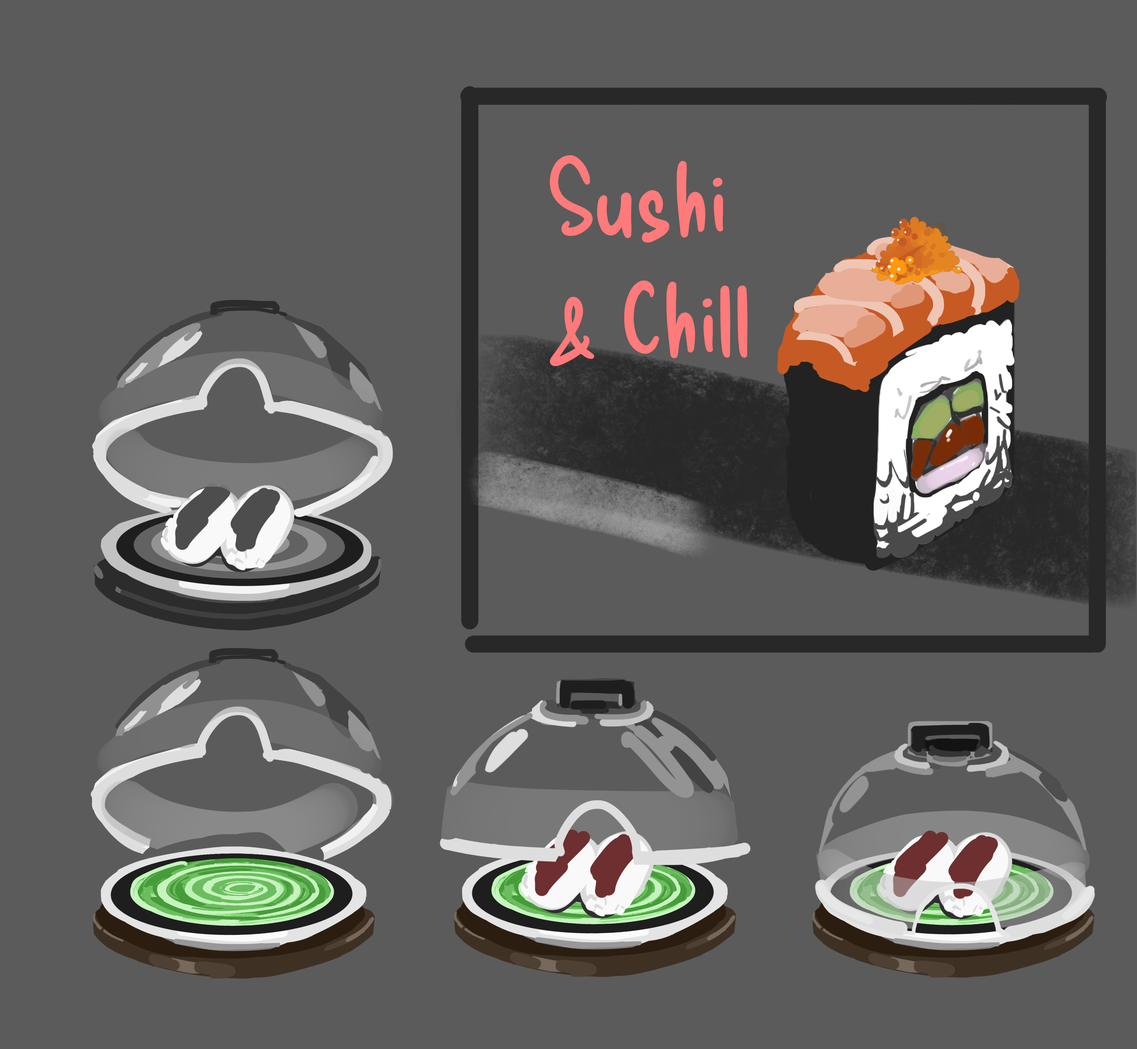
<style>
.page{position:relative;width:1137px;height:1049px;background:#5b5b5b}
.page>*{position:absolute;margin:0}
.t1{font:100.6px "DeliciousHandrawn-Regular";color:#ff7a7a}
</style>
<div class="page">
<p class="t1" style="left:550px;top:155px;width:197px;height:211px">Sushi <br>&amp; Chill</p>
</div>
